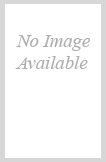
<style>
.page{position:relative;width:106px;height:162px;background:#ffffff}
.page>*{position:absolute;margin:0}
.t1{font:18.7px "TimesNewRomanPS-ItalicMT";color:#acacac}
</style>
<div class="page">
<p class="t1" style="left:15px;top:35px;width:75px;height:34px">No Image<br>Available</p>
</div>
